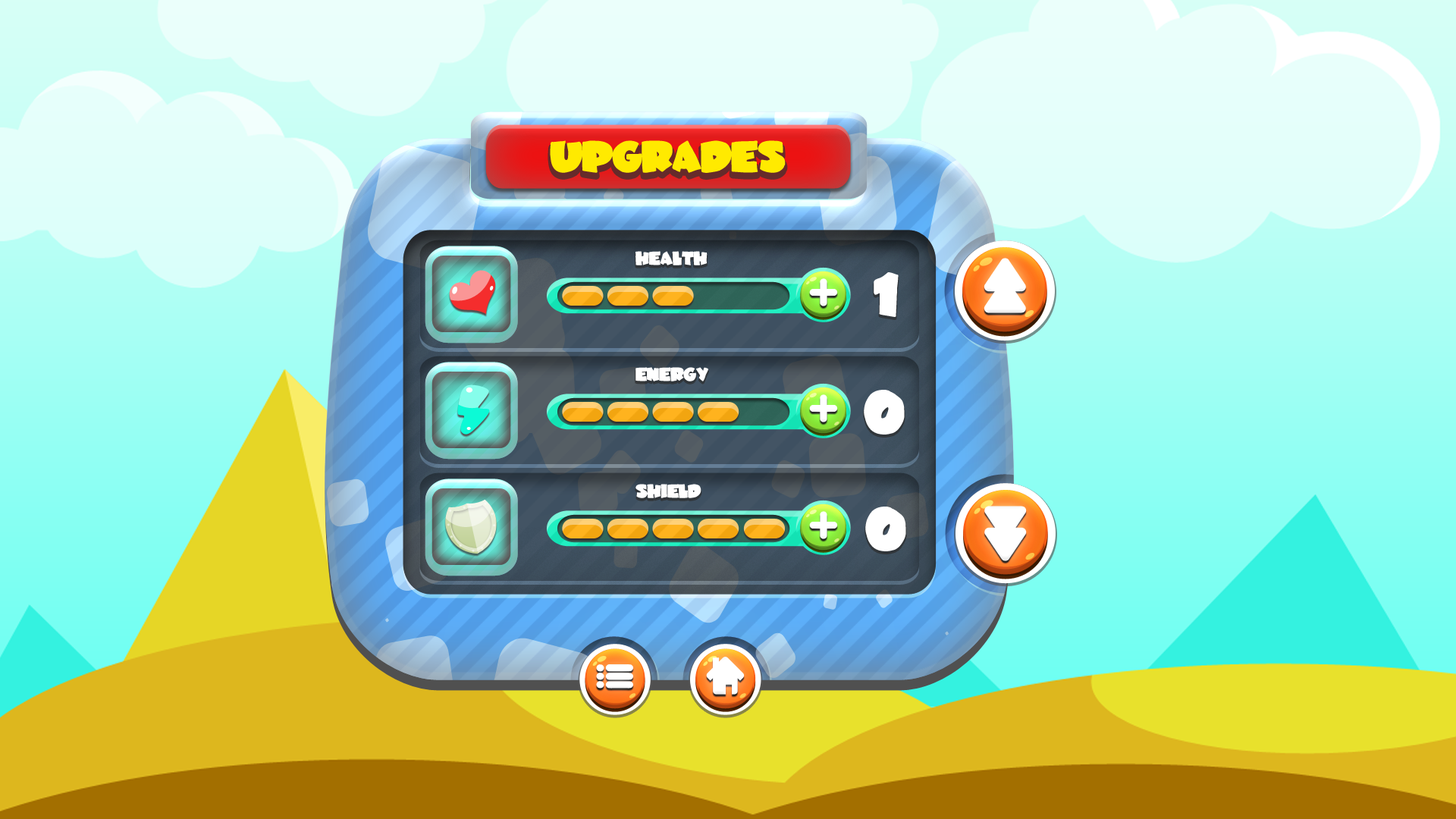
<style>
.page{position:relative;width:1456px;height:819px}
.page>*{position:absolute;margin:0}
.t1{font:31.9px "JuneBug";letter-spacing:-0.02em;color:#ffea00}
.t2{font:13.7px "JuneBug";letter-spacing:-0.02em;color:#ffffff}
.t3{font:44.6px "JuneBug";letter-spacing:-0.02em;color:#ffffff}
</style>
<div class="page">
<p class="t1" style="left:550px;top:140px;width:236px;height:33px">UPGRADES</p>
<p class="t2" style="left:635px;top:251px;width:73px;height:14px">HEALTH</p>
<p class="t3" style="left:874px;top:272px;width:25px;height:45px">1</p>
<p class="t2" style="left:635px;top:367px;width:73px;height:14px">ENERGY</p>
<p class="t3" style="left:864px;top:390px;width:41px;height:45px">0</p>
<p class="t2" style="left:635px;top:484px;width:66px;height:14px">SHIELD</p>
<p class="t3" style="left:865px;top:507px;width:41px;height:44px">0</p>
</div>
